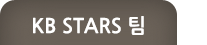
<style>
.page{position:relative;width:207px;height:45px;background:#ffffff}
.page>*{position:absolute;margin:0}
.t1{font:20px "NanumGothicBold";color:#ffffff}
</style>
<div class="page">
<p class="t1" style="left:33px;top:16px;width:111px;height:19px">KB STARS 팀</p>
</div>
